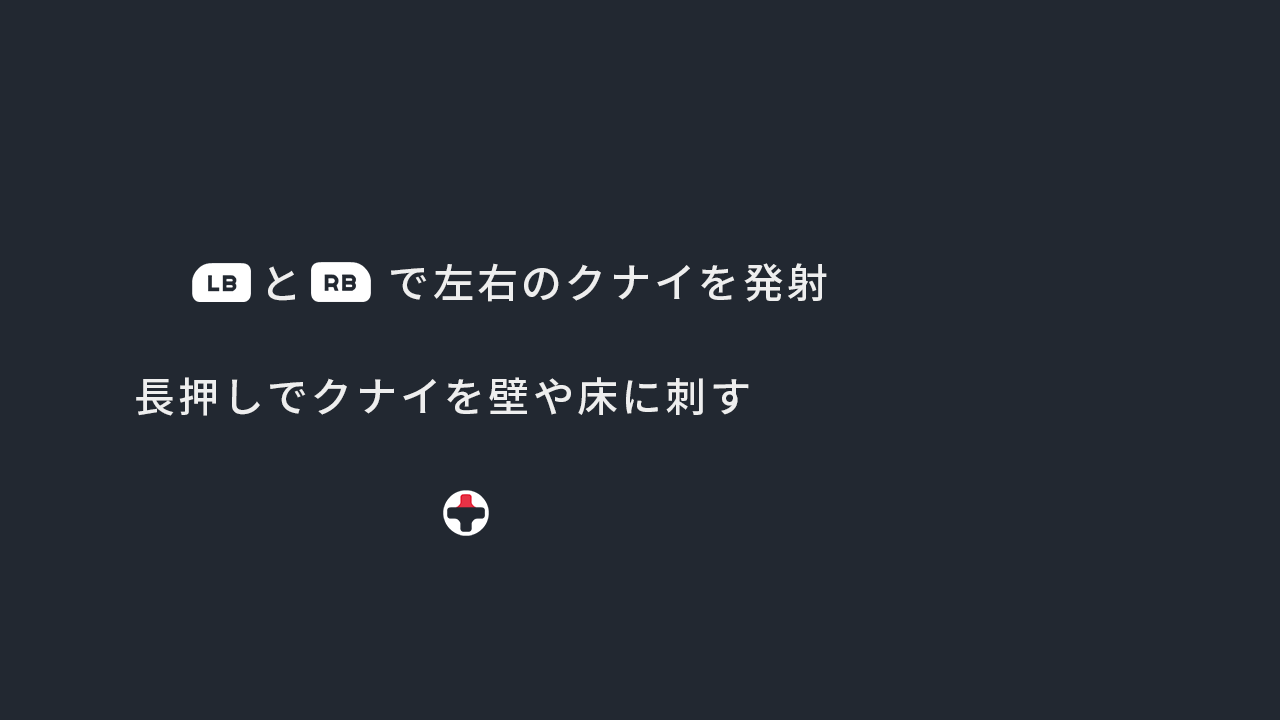
<style>
.page{position:relative;width:1280px;height:720px;background:#222831}
.page>*{position:absolute;margin:0}
.t1{font:41px "SourceHanSansJP-Medium";letter-spacing:0.08em;color:#eeeeee}
</style>
<div class="page">
<p class="t1" style="left:268px;top:266px;width:27px;height:35px">と</p>
<p class="t1" style="left:391px;top:263px;width:436px;height:39px">で左右のクナイを発射</p>
<p class="t1" style="left:136px;top:377px;width:613px;height:39px">長押しでクナイを壁や床に刺す</p>
</div>
